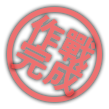
<style>
.page{position:relative;width:109px;height:109px;background:#ffffff}
.page>*{position:absolute;margin:0}
.t1{font:35px/30px "GothicMB101Pr6N-Medium";color:#ee7070;font-weight:bold}
</style>
<div class="page">
<p class="t1" style="left:11px;top:15px;width:84px;height:82px;text-align:center;rotate:27deg">作戰<br>完成</p>
</div>
